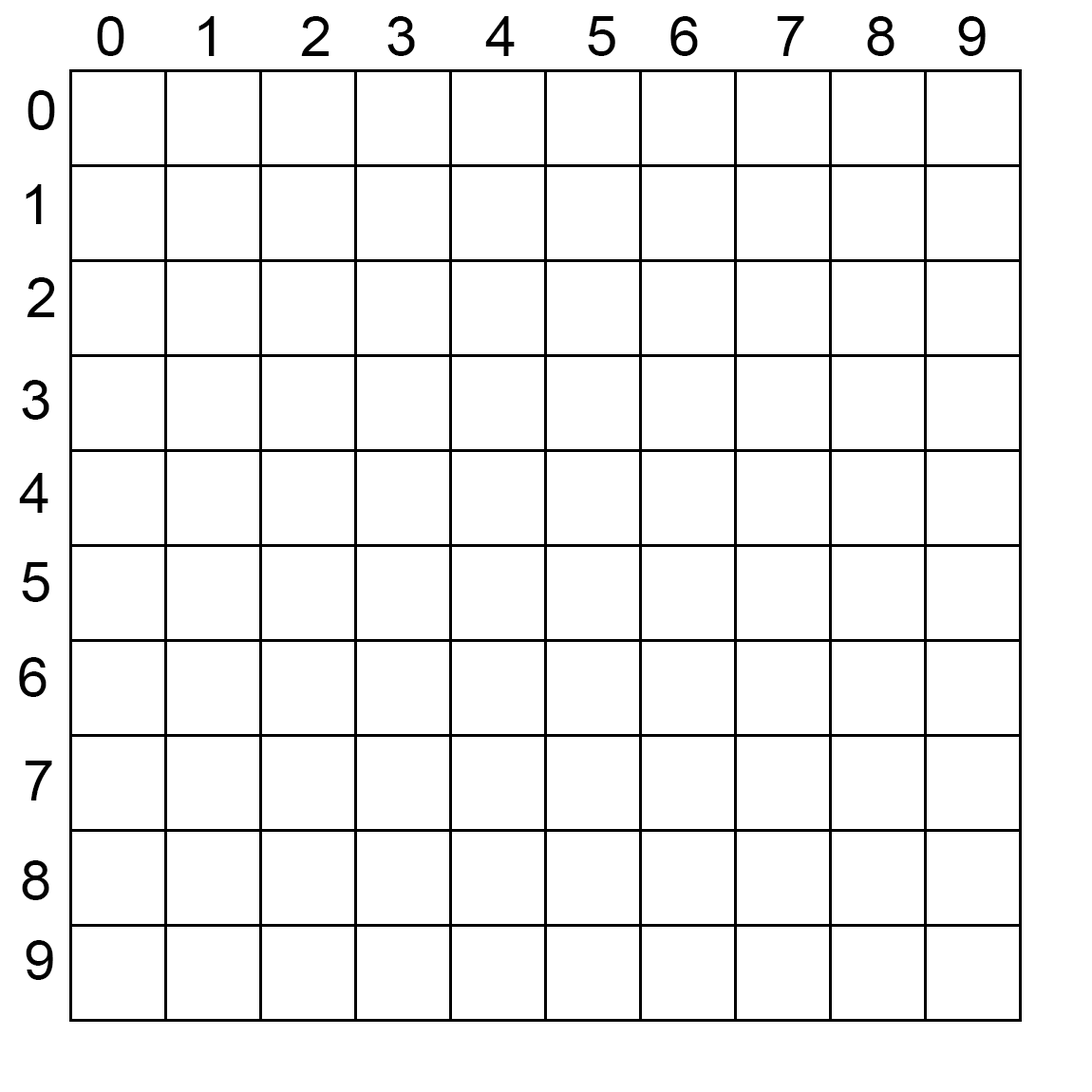
<style>
.page{position:relative;width:1092px;height:1092px;background:#ffffff}
.page>*{position:absolute;margin:0}
.t1{font:57px "ArialMT";color:#000000}
</style>
<div class="page">
<p class="t1" style="left:97px;top:16px;width:27px;height:40px">0</p>
<p class="t1" style="left:198px;top:16px;width:17px;height:40px">1</p>
<p class="t1" style="left:301px;top:16px;width:28px;height:40px">2</p>
<p class="t1" style="left:387px;top:16px;width:28px;height:40px">3</p>
<p class="t1" style="left:485px;top:16px;width:30px;height:40px">4</p>
<p class="t1" style="left:588px;top:16px;width:27px;height:40px">5</p>
<p class="t1" style="left:670px;top:16px;width:28px;height:40px">6</p>
<p class="t1" style="left:777px;top:16px;width:27px;height:40px">7</p>
<p class="t1" style="left:867px;top:16px;width:27px;height:40px">8</p>
<p class="t1" style="left:958px;top:16px;width:28px;height:40px">9</p>
<p class="t1" style="left:28px;top:90px;width:27px;height:40px">0</p>
<p class="t1" style="left:26px;top:184px;width:16px;height:40px">1</p>
<p class="t1" style="left:27px;top:277px;width:28px;height:40px">2</p>
<p class="t1" style="left:22px;top:380px;width:27px;height:40px">3</p>
<p class="t1" style="left:19px;top:473px;width:29px;height:40px">4</p>
<p class="t1" style="left:22px;top:562px;width:27px;height:40px">5</p>
<p class="t1" style="left:19px;top:657px;width:28px;height:40px">6</p>
<p class="t1" style="left:25px;top:761px;width:27px;height:39px">7</p>
<p class="t1" style="left:22px;top:860px;width:27px;height:40px">8</p>
<p class="t1" style="left:26px;top:940px;width:27px;height:40px">9</p>
</div>
